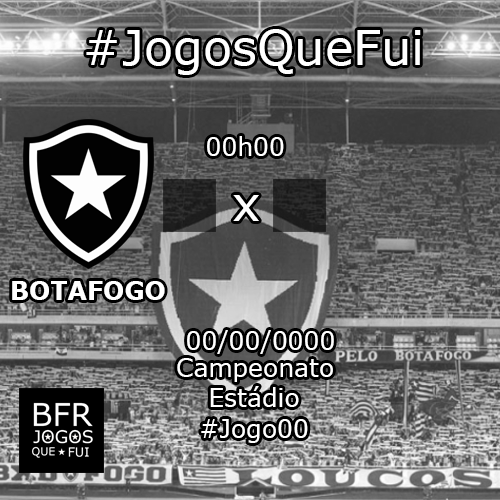
<style>
.page{position:relative;width:500px;height:500px}
.page>*{position:absolute;margin:0}
.t1{font:48px "Verdana";color:#ffffff}
.t2{font:25px "Verdana";color:#ffffff}
.t3{font:25px "Verdana-Bold";color:#ffffff}
</style>
<div class="page">
<p class="t1" style="left:86px;top:29px;width:335px;height:46px">#JogosQueFui</p>
<p class="t2" style="left:207px;top:136px;width:77px;height:20px">00h00</p>
<p class="t1" style="left:233px;top:195px;width:26px;height:26px">x</p>
<p class="t3" style="left:12px;top:281px;width:153px;height:19px">BOTAFOGO</p>
<p class="t2" style="left:187px;top:330px;width:147px;height:24px">00/00/0000</p>
<p class="t2" style="left:177px;top:358px;width:156px;height:24px">Campeonato</p>
<p class="t2" style="left:210px;top:386px;width:89px;height:21px">Estádio</p>
<p class="t2" style="left:201px;top:419px;width:107px;height:24px">#Jogo00</p>
</div>
